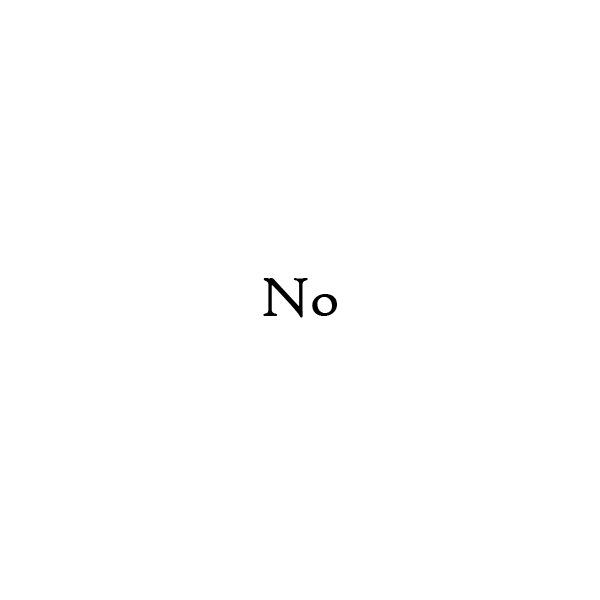
<style>
.page{position:relative;width:600px;height:600px;background:#ffffff}
.page>*{position:absolute;margin:0}
.t1{font:59.2px "HighTowerText-Reg";color:#000000}
</style>
<div class="page">
<p class="t1" style="left:263px;top:278px;width:74px;height:40px">No</p>
</div>
